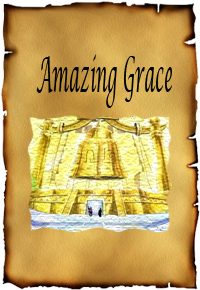
<style>
.page{position:relative;width:200px;height:290px}
.page>*{position:absolute;margin:0}
.t1{font:48px "LucidaCalligraphy-Italic";color:#000000;scale:0.34 1}
</style>
<div class="page">
<p class="t1" style="left:36px;top:54px;width:136px;height:54px">Amazing Grace</p>
</div>
